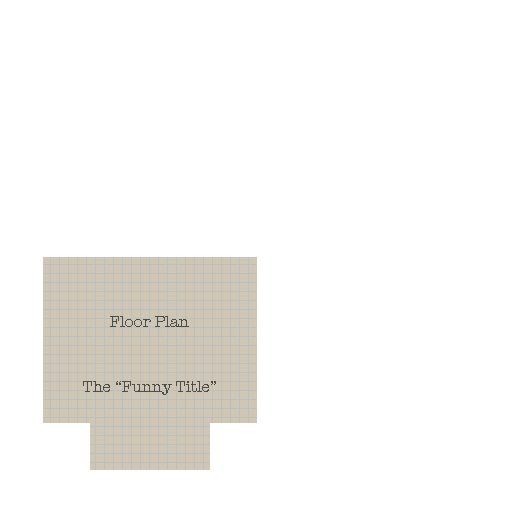
<style>
.page{position:relative;width:512px;height:512px;background:#ffffff}
.page>*{position:absolute;margin:0}
.t1{font:16px "AmericanTypewriter";color:#4f4e46}
</style>
<div class="page">
<p class="t1" style="left:110px;top:316px;width:79px;height:11px">Floor Plan</p>
<p class="t1" style="left:83px;top:381px;width:133px;height:14px">The “Funny Title”</p>
</div>
